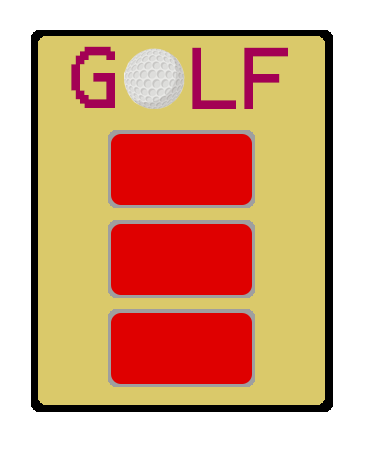
<style>
.page{position:relative;width:369px;height:454px;background:#dac96a}
.page>*{position:absolute;margin:0}
.t1{font:70px "Terminal";color:#a30054}
</style>
<div class="page">
<p class="t1" style="left:71px;top:46px;width:44px;height:62px">G</p>
<p class="t1" style="left:192px;top:47px;width:44px;height:62px">L</p>
<p class="t1" style="left:244px;top:47px;width:44px;height:62px">F</p>
</div>
